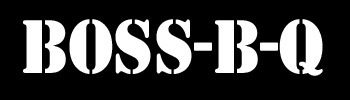
<style>
.page{position:relative;width:350px;height:100px;background:#000000}
.page>*{position:absolute;margin:0}
.t1{font:79.2px "Stencil";color:#ffffff;scale:0.91 1}
</style>
<div class="page">
<p class="t1" style="left:23px;top:19px;width:300px;height:57px">BOSS-B-Q</p>
</div>
